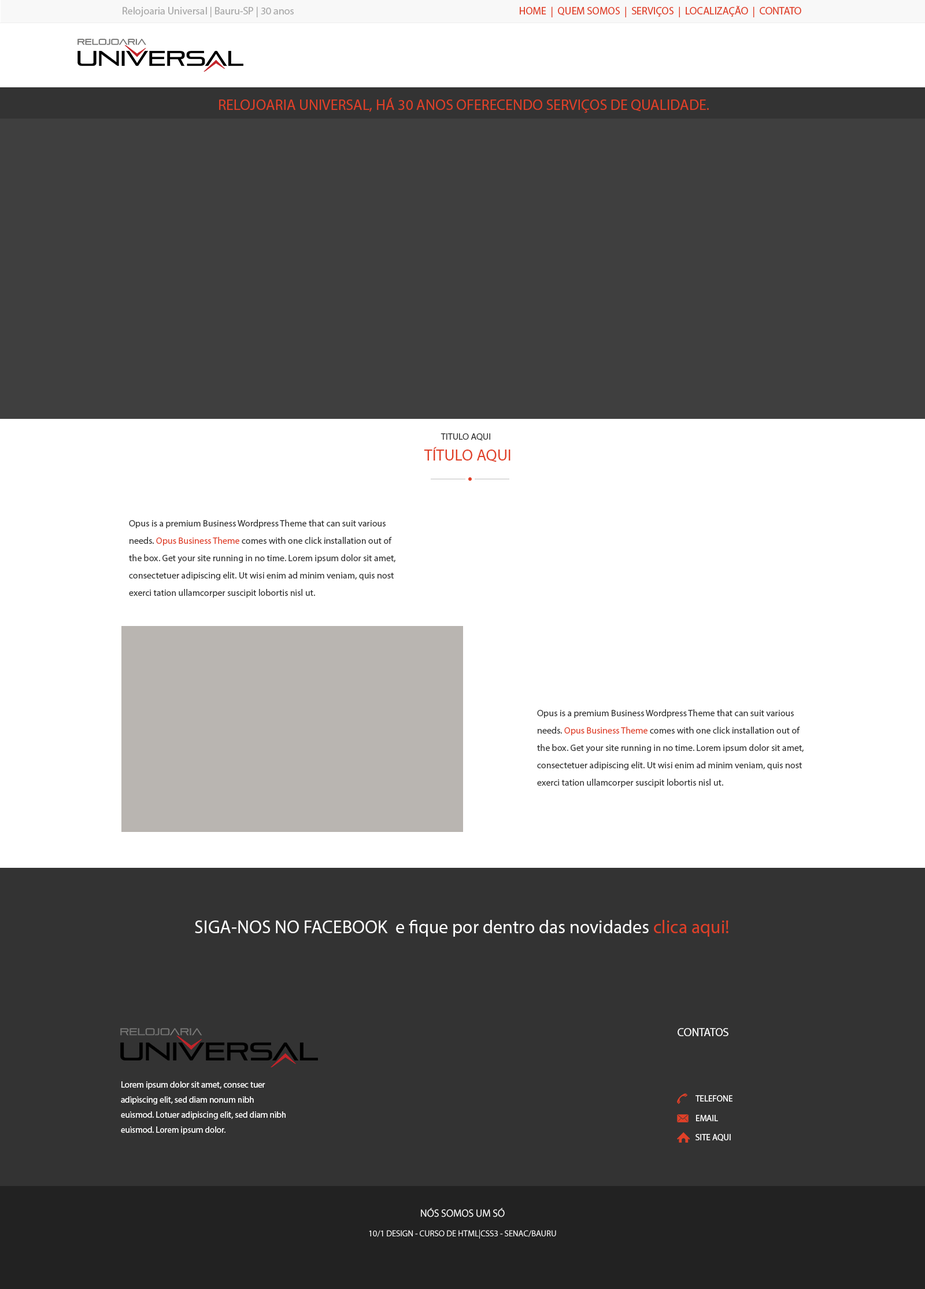
<style>
.page{position:relative;width:925px;height:1289px;background:#ffffff}
.page>*{position:absolute;margin:0}
.t1{font:10.4px "MyriadPro-Regular";color:#e04028}
.t2{font:10.4px "MyriadPro-Regular";color:#aaaaaa}
.t3{font:14.9px "MyriadPro-Regular";color:#e04028;text-transform:uppercase}
.t4{font:9.3px "MyriadPro-Regular";color:#333333;text-transform:uppercase}
.t5{font:16.2px "MyriadPro-Regular";color:#e04028;text-transform:uppercase}
.t6{font:9.3px/17.4px "MyriadPro-Regular";color:#333333}
.t7{font:9.3px/17.4px "MyriadPro-Regular";color:#e04028}
.t8{font:18.5px "MyriadPro-Regular";color:#ffffff}
.t9{font:18.5px "MyriadPro-Regular";color:#e04028}
.t10{font:11.6px "MyriadPro-Regular";letter-spacing:-0.01em;color:#ffffff;text-transform:uppercase}
.t11{font:8.7px/15px "MyriadPro-Regular";color:#ffffff}
.t12{font:8.7px "MyriadPro-Regular";color:#ffffff}
.t13{font:10.4px "MyriadPro-Regular";letter-spacing:-0.01em;color:#ffffff}
.t14{font:8.7px "MyriadPro-Regular";letter-spacing:-0.01em;color:#ffffff}
</style>
<div class="page">
<p class="t1" style="left:520px;top:6px;width:282px;height:11px">HOME  |  QUEM SOMOS  |  SERVIÇOS  |  LOCALIZAÇÃO  |  CONTATO</p>
<p class="t2" style="left:123px;top:6px;width:171px;height:11px">Relojoaria Universal | Bauru-SP | 30 anos</p>
<p class="t3" style="left:219px;top:98px;width:490px;height:15px">RELOJOARIA UNIVERSAL, HÁ 30 ANOS OFERECENDO SERVIÇOS DE QUALIDADE.</p>
<p class="t4" style="left:441px;top:433px;width:49px;height:8px">TITULO AQUI</p>
<p class="t5" style="left:424px;top:446px;width:87px;height:16px">TÍTULO AQUI</p>
<p class="t6" style="left:129px;top:519px;width:267px;height:78px">Opus is a premium Business Wordpress Theme that can suit various <br>needs. <span class="t7">Opus Business Theme</span> comes with one click installation out of <br>the box. Get your site running in no time. Lorem ipsum dolor sit amet, <br>consectetuer adipiscing elit. Ut wisi enim ad minim veniam, quis nost <br>exerci tation ullamcorper suscipit lobortis nisl ut.</p>
<p class="t6" style="left:537px;top:709px;width:267px;height:78px">Opus is a premium Business Wordpress Theme that can suit various <br>needs. <span class="t7">Opus Business Theme</span> comes with one click installation out of <br>the box. Get your site running in no time. Lorem ipsum dolor sit amet, <br>consectetuer adipiscing elit. Ut wisi enim ad minim veniam, quis nost <br>exerci tation ullamcorper suscipit lobortis nisl ut.</p>
<p class="t8" style="left:195px;top:920px;width:534px;height:16px">SIGA-NOS NO FACEBOOK  e fique por dentro das novidades <span class="t9">clica aqui!</span></p>
<p class="t10" style="left:678px;top:1028px;width:51px;height:8px">CONTATOS</p>
<p class="t11" style="left:121px;top:1081px;width:165px;height:53px">Lorem ipsum dolor sit amet, consec tuer adipiscing elit, sed diam nonum nibh euismod. Lotuer adipiscing elit, sed diam nibh euismod. Lorem ipsum dolor.</p>
<p class="t12" style="left:696px;top:1095px;width:37px;height:6px">TELEFONE</p>
<p class="t12" style="left:696px;top:1115px;width:22px;height:6px">EMAIL</p>
<p class="t12" style="left:696px;top:1134px;width:35px;height:7px">SITE AQUI</p>
<p class="t13" style="left:421px;top:1208px;width:84px;height:9px">NÓS SOMOS UM SÓ</p>
<p class="t14" style="left:369px;top:1229px;width:187px;height:9px">10/1 DESIGN - CURSO DE HTML|CSS3 - SENAC/BAURU</p>
</div>
